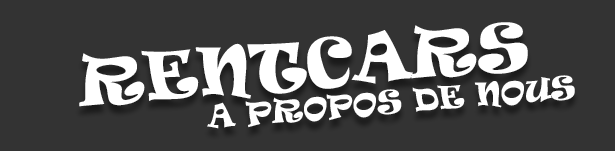
<style>
.page{position:relative;width:615px;height:151px;background:#333333}
.page>*{position:absolute;margin:0}
.t1{font:30px/33px "Ravie";color:#ffffff;text-transform:uppercase}
.t2{font:27.9px/59px "Ravie";color:#ffffff;text-transform:uppercase}
.t3{font:63.3px/56px "Ravie";color:#ffffff;text-transform:uppercase}
</style>
<div class="page">
<p class="t1" style="left:79px;top:22px;width:496px;height:107px;text-align:center;rotate:-5deg"><span class="t2"><br></span><span class="t3">RENTCARS<br>                </span>A propos de nous</p>
</div>
